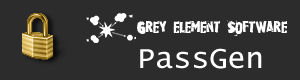
<style>
.page{position:relative;width:300px;height:80px;background:#2c2c2c}
.page>*{position:absolute;margin:0}
.t1{font:14px "RubbermaidSingle";color:#ffffff}
.t2{font:30px "LucidaConsole";color:#ffffff}
</style>
<div class="page">
<p class="t1" style="left:137px;top:20px;width:151px;height:16px">Grey element Software</p>
<p class="t2" style="left:140px;top:48px;width:122px;height:21px">PassGen</p>
</div>
